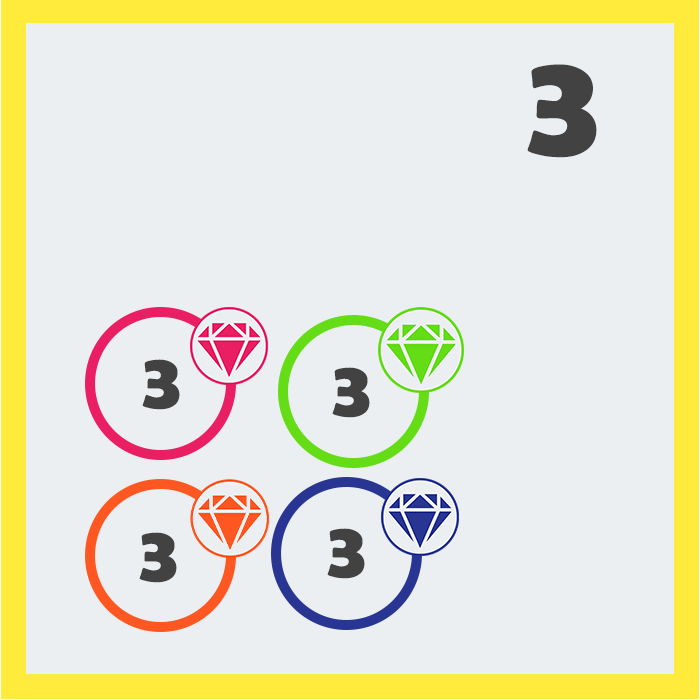
<style>
.page{position:relative;width:700px;height:700px;background:#eceff1}
.page>*{position:absolute;margin:0}
.t1{font:150px "BerlinSansFBDemi-Bold";color:#424242}
.t2{font:80px "BerlinSansFBDemi-Bold";color:#424242}
</style>
<div class="page">
<p class="t1" style="left:527px;top:64px;width:70px;height:94px">3</p>
<p class="t2" style="left:142px;top:359px;width:38px;height:51px">3</p>
<p class="t2" style="left:332px;top:367px;width:38px;height:51px">3</p>
<p class="t2" style="left:139px;top:532px;width:38px;height:51px">3</p>
<p class="t2" style="left:327px;top:528px;width:38px;height:51px">3</p>
</div>
